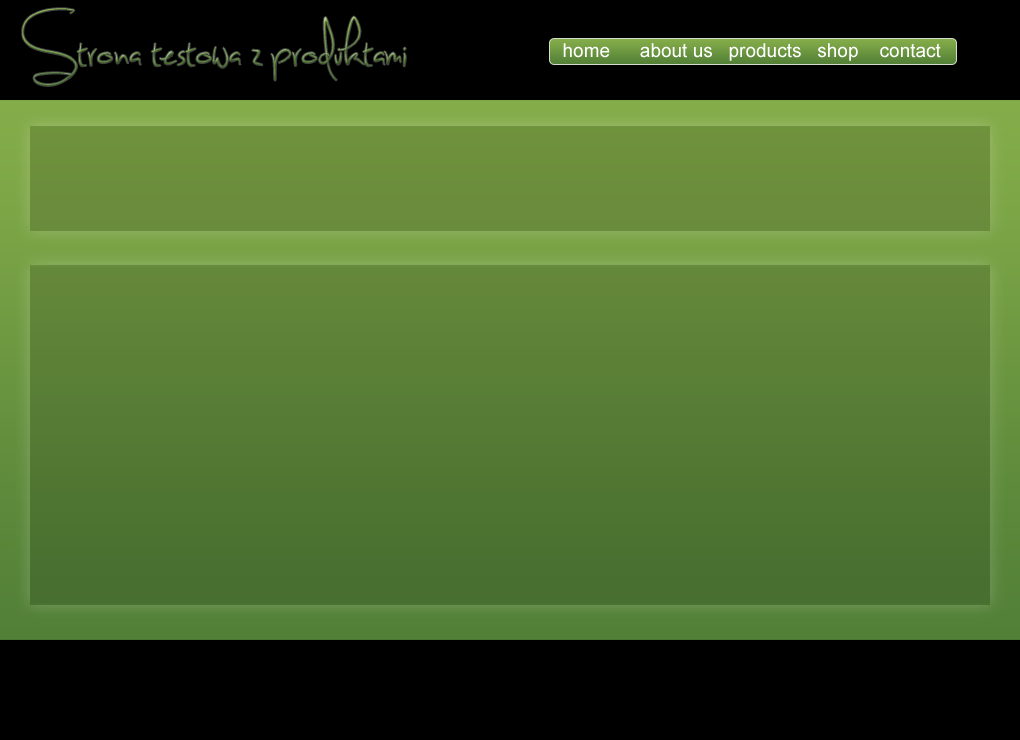
<style>
.page{position:relative;width:1020px;height:740px;background:#000000}
.page>*{position:absolute;margin:0}
.t1{font:66px "SweetlyBroken";scale:0.82 1}
.t2{font:19px "ArialMT";color:#ffffff}
</style>
<div class="page">
<p class="t1" style="left:22px;top:8px;width:384px;height:78px">Strona testowa z produktami</p>
<p class="t2" style="left:563px;top:43px;width:378px;height:18px">home   about us   products   shop    contact</p>
</div>
